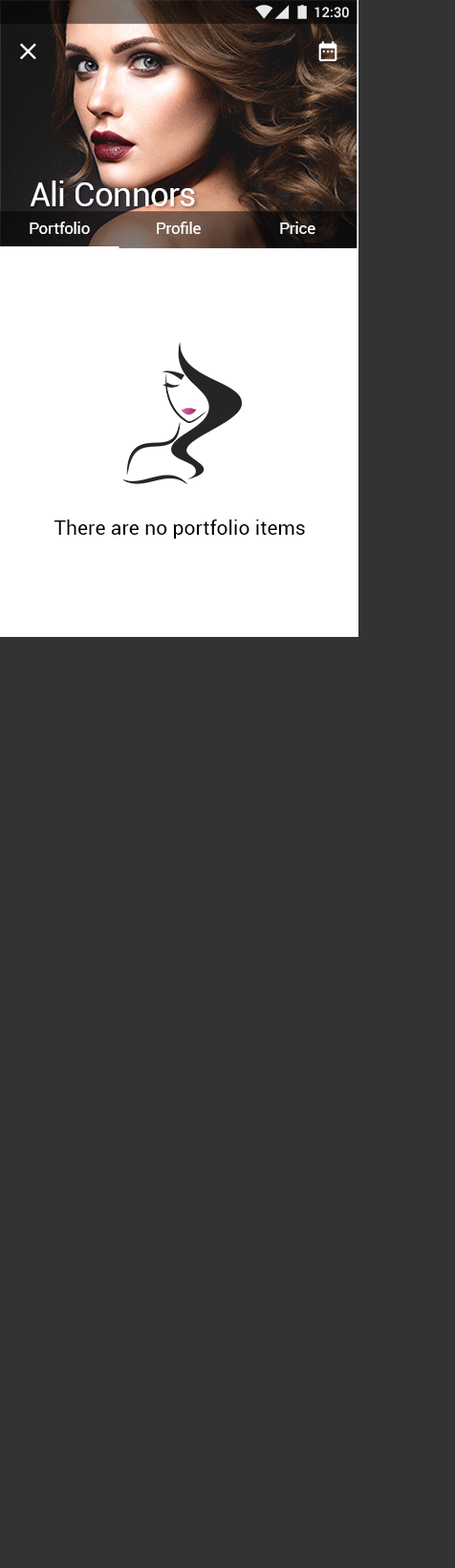
<style>
.page{position:relative;width:455px;height:1568px;background:#333333}
.page>*{position:absolute;margin:0}
.t1{font:13.9px "Roboto-Medium";color:#ffffff}
.t2{font:33.7px "Roboto-Regular";letter-spacing:-0.005em;color:#ffffff}
.t3{font:15.8px "Roboto-Regular";letter-spacing:0.01em;color:#ffffff}
.t4{font:19.8px "Roboto-Regular";letter-spacing:0.01em;color:#000000}
</style>
<div class="page">
<p class="t1" style="left:314px;top:7px;width:35px;height:11px">12:30</p>
<p class="t2" style="left:30px;top:180px;width:165px;height:26px">Ali Connors</p>
<p class="t3" style="left:30px;top:222px;width:60px;height:12px">Portfolio</p>
<p class="t3" style="left:157px;top:222px;width:44px;height:12px">Profile</p>
<p class="t3" style="left:280px;top:222px;width:35px;height:12px">Price</p>
<p class="t4" style="left:53px;top:519px;width:252px;height:20px">There are no portfolio items</p>
</div>
